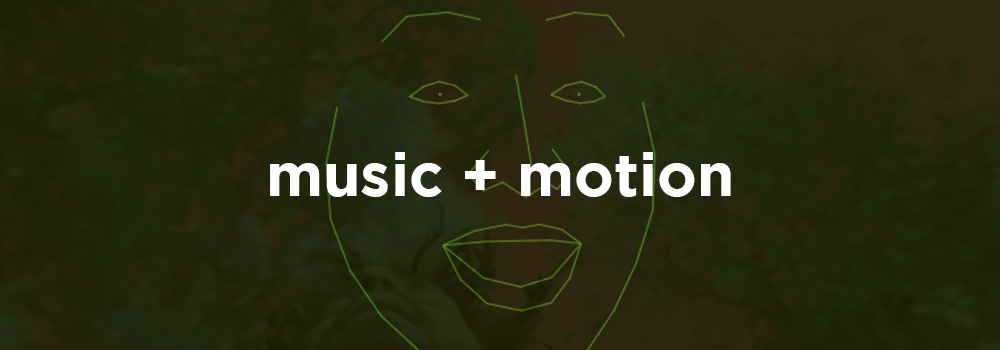
<style>
.page{position:relative;width:1000px;height:350px}
.page>*{position:absolute;margin:0}
.t1{font:60px "GothamBold";color:#ffffff}
</style>
<div class="page">
<p class="t1" style="left:270px;top:152px;width:461px;height:45px">music + motion</p>
</div>
